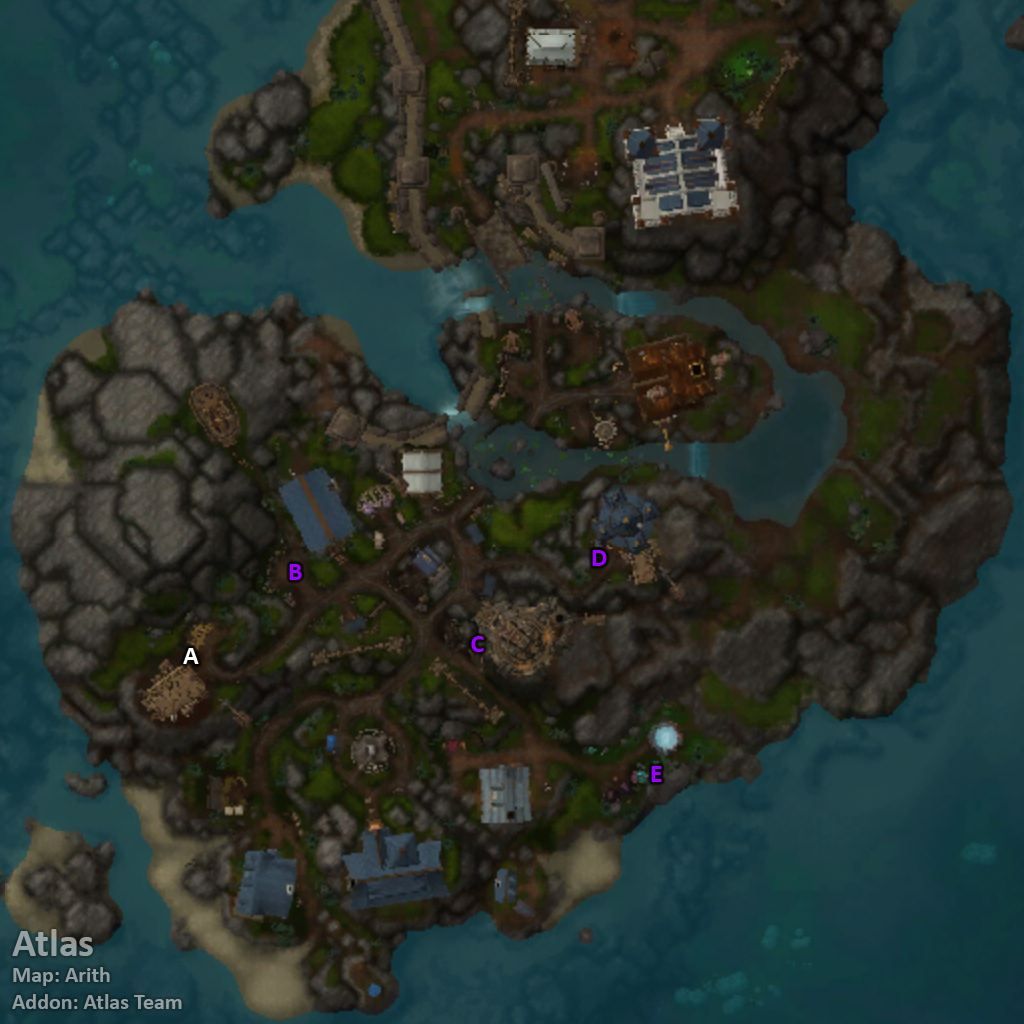
<style>
.page{position:relative;width:1024px;height:1024px}
.page>*{position:absolute;margin:0}
.t1{font:26px "Calibri-Bold";color:#9900ff}
.t2{font:26px "Calibri-Bold";color:#ffffff}
.t3{font:22px "Calibri-Bold";color:#939ea0}
.t4{font:40px "Calibri-Bold";color:#939ea0}
</style>
<div class="page">
<p class="t1" style="left:592px;top:550px;width:15px;height:16px">D</p>
<p class="t1" style="left:289px;top:564px;width:13px;height:16px">B</p>
<p class="t1" style="left:471px;top:636px;width:13px;height:16px">C</p>
<p class="t2" style="left:183px;top:648px;width:16px;height:16px">A</p>
<p class="t1" style="left:651px;top:766px;width:11px;height:16px">E</p>
<p class="t3" style="left:12px;top:929px;width:170px;height:80px"><span class="t4">Atlas<br></span>Map: Arith<br>Addon: Atlas Team</p>
</div>
